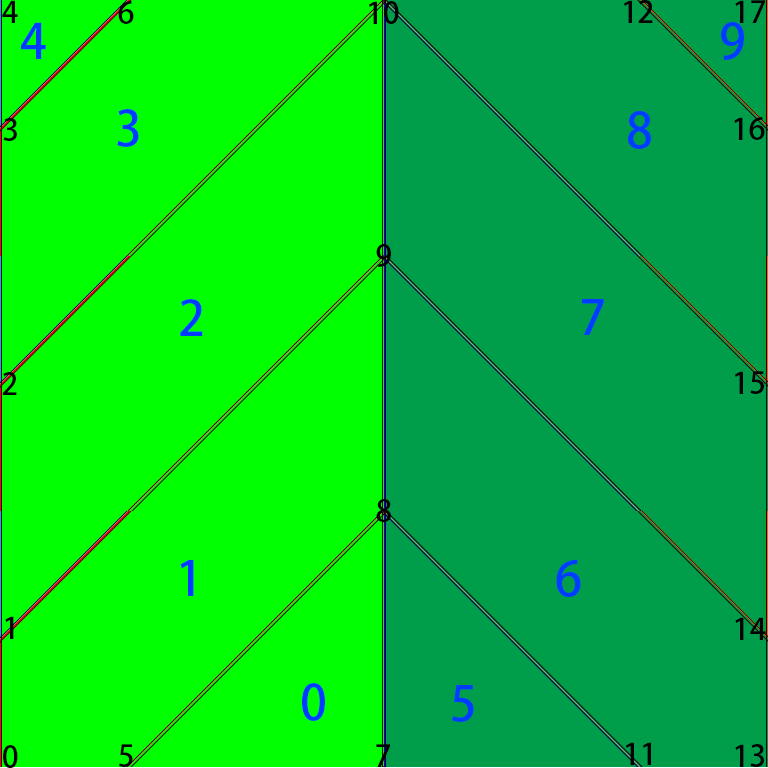
<style>
.page{position:relative;width:768px;height:768px;background:#00ff00}
.page>*{position:absolute;margin:0}
.t1{font:30px "AdobeHeitiStd-Regular";color:#000000}
.t2{font:48px "AdobeHeitiStd-Regular";color:#003cff}
</style>
<div class="page">
<p class="t1" style="left:2px;top:0px;width:16px;height:23px">4</p>
<p class="t1" style="left:118px;top:1px;width:16px;height:23px">6</p>
<p class="t1" style="left:369px;top:1px;width:30px;height:23px">10</p>
<p class="t1" style="left:624px;top:0px;width:29px;height:23px">12</p>
<p class="t1" style="left:735px;top:0px;width:30px;height:23px">17</p>
<p class="t2" style="left:21px;top:22px;width:25px;height:37px">4</p>
<p class="t2" style="left:721px;top:22px;width:23px;height:38px">9</p>
<p class="t2" style="left:117px;top:109px;width:22px;height:38px">3</p>
<p class="t2" style="left:628px;top:111px;width:23px;height:38px">8</p>
<p class="t1" style="left:3px;top:118px;width:14px;height:23px">3</p>
<p class="t1" style="left:734px;top:117px;width:31px;height:23px">16</p>
<p class="t1" style="left:376px;top:244px;width:15px;height:23px">9</p>
<p class="t2" style="left:180px;top:299px;width:23px;height:37px">2</p>
<p class="t2" style="left:582px;top:299px;width:22px;height:36px">7</p>
<p class="t1" style="left:2px;top:372px;width:15px;height:23px">2</p>
<p class="t1" style="left:735px;top:371px;width:29px;height:23px">15</p>
<p class="t1" style="left:376px;top:499px;width:15px;height:23px">8</p>
<p class="t2" style="left:180px;top:560px;width:14px;height:36px">1</p>
<p class="t2" style="left:556px;top:559px;width:25px;height:38px">6</p>
<p class="t1" style="left:5px;top:616px;width:9px;height:23px">1</p>
<p class="t1" style="left:735px;top:617px;width:31px;height:23px">14</p>
<p class="t2" style="left:302px;top:683px;width:23px;height:38px">0</p>
<p class="t2" style="left:452px;top:685px;width:22px;height:37px">5</p>
<p class="t1" style="left:3px;top:745px;width:15px;height:23px">0</p>
<p class="t1" style="left:119px;top:744px;width:14px;height:23px">5</p>
<p class="t1" style="left:376px;top:744px;width:14px;height:23px">7</p>
<p class="t1" style="left:626px;top:742px;width:25px;height:23px">11</p>
<p class="t1" style="left:735px;top:744px;width:29px;height:23px">13</p>
</div>
